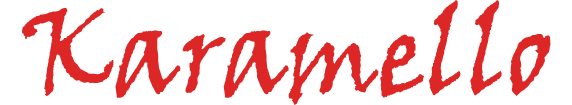
<style>
.page{position:relative;width:572px;height:105px;background:#ffffff}
.page>*{position:absolute;margin:0}
.t1{font:122.5px "VinerHandITC";color:#dc2726;scale:0.86 1}
</style>
<div class="page">
<p class="t1" style="left:22px;top:0px;width:529px;height:105px">Karamello</p>
</div>
